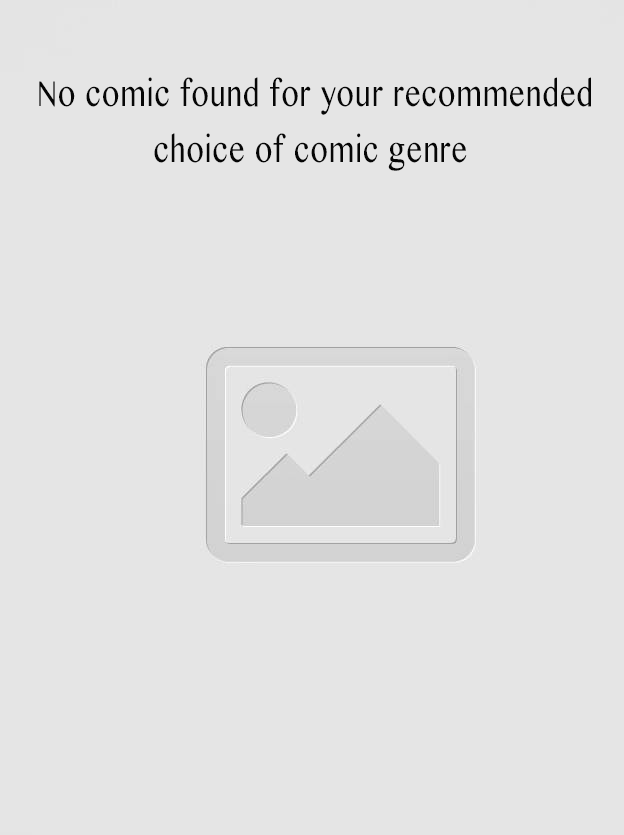
<style>
.page{position:relative;width:624px;height:835px;background:#e5e5e5}
.page>*{position:absolute;margin:0}
.t1{font:36.1px/56px "TamilMN";letter-spacing:0.04em;color:#060606;scale:0.76 1}
</style>
<div class="page">
<p class="t1" style="left:39px;top:77px;width:552px;height:94px;text-align:center">No comic found for your recommended<br>choice of comic genre</p>
</div>
